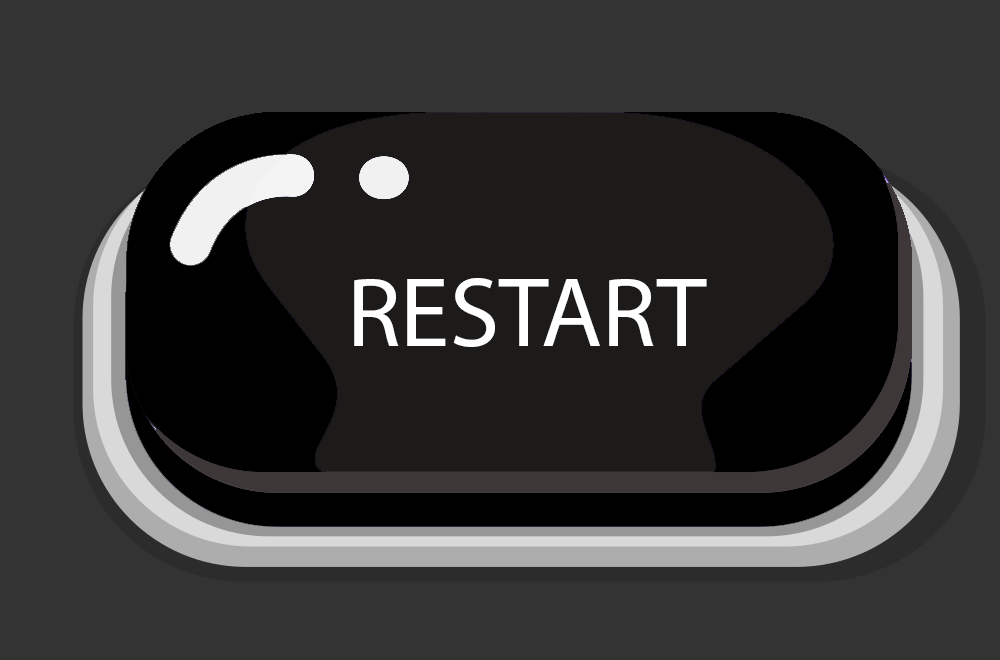
<style>
.page{position:relative;width:1000px;height:660px;background:#333333}
.page>*{position:absolute;margin:0}
.t1{font:100px "MyriadPro-Regular";color:#ffffff}
</style>
<div class="page">
<p class="t1" style="left:354px;top:278px;width:353px;height:69px">RESTART</p>
</div>
